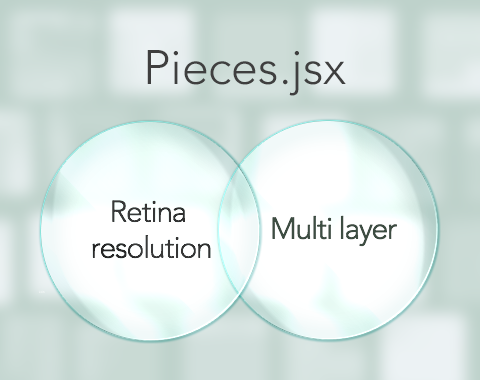
<style>
.page{position:relative;width:480px;height:380px}
.page>*{position:absolute;margin:0}
.t1{font:48px "Avenir-Light";color:#3f3f3f}
.t2{font:30px "Avenir-Light";letter-spacing:-0.04em;color:#353535}
.t3{font:30px "Avenir-Light";letter-spacing:-0.04em;color:#3d4d42}
.t4{font:3.3px "MyriadPro-Regular";color:#ffffff}
</style>
<div class="page">
<p class="t1" style="left:147px;top:50px;width:199px;height:46px">Pieces.jsx</p>
<p class="t2" style="left:92px;top:200px;width:119px;height:59px;text-align:center">Retina <br>resolution</p>
<p class="t3" style="left:272px;top:215px;width:125px;height:32px">Multi layer</p>
<p class="t4" style="left:39px;top:290px;width:6px;height:3px">Join</p>
</div>
